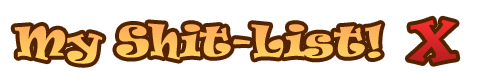
<style>
.page{position:relative;width:480px;height:82px;background:#ffffff}
.page>*{position:absolute;margin:0}
.t1{font:40px "Ravie";color:#fec15d}
.t2{font:50px "Ravie"}
</style>
<div class="page">
<p class="t1" style="left:14px;top:23px;width:368px;height:41px">My Shit-List!</p>
<p class="t2" style="left:408px;top:19px;width:49px;height:44px">X</p>
</div>
